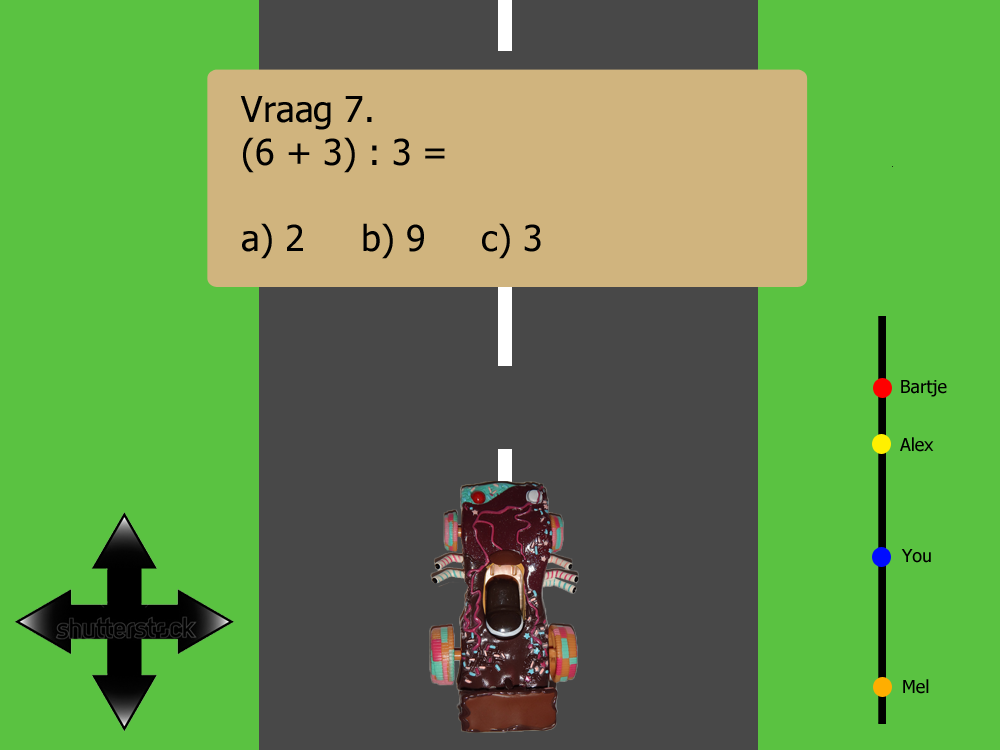
<style>
.page{position:relative;width:1000px;height:750px;background:#5ac241}
.page>*{position:absolute;margin:0}
.t1{font:35.9px "Tahoma";color:#000000}
.t2{font:17.9px "Tahoma";color:#000000}
</style>
<div class="page">
<p class="t1" style="left:240px;top:96px;width:301px;height:163px">Vraag 7.<br>(6 + 3) : 3 = <br><br>a) 2     b) 9     c) 3</p>
<p class="t2" style="left:901px;top:380px;width:46px;height:17px">Bartje</p>
<p class="t2" style="left:900px;top:437px;width:34px;height:15px">Alex</p>
<p class="t2" style="left:901px;top:549px;width:30px;height:14px">You</p>
<p class="t2" style="left:903px;top:679px;width:26px;height:15px">Mel</p>
</div>
